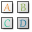
<style>
.page{position:relative;width:32px;height:32px;background:#ffffff}
.page>*{position:absolute;margin:0}
.t1{font:13px "Gabriola";color:#e7923f}
.t2{font:13px "Gabriola"}
</style>
<div class="page">
<p class="t1" style="left:3px;top:3px;width:8px;height:8px">A</p>
<p class="t2" style="left:20px;top:3px;width:6px;height:8px">B</p>
<p class="t2" style="left:4px;top:19px;width:6px;height:8px">C</p>
<p class="t2" style="left:19px;top:19px;width:8px;height:8px">D</p>
</div>
